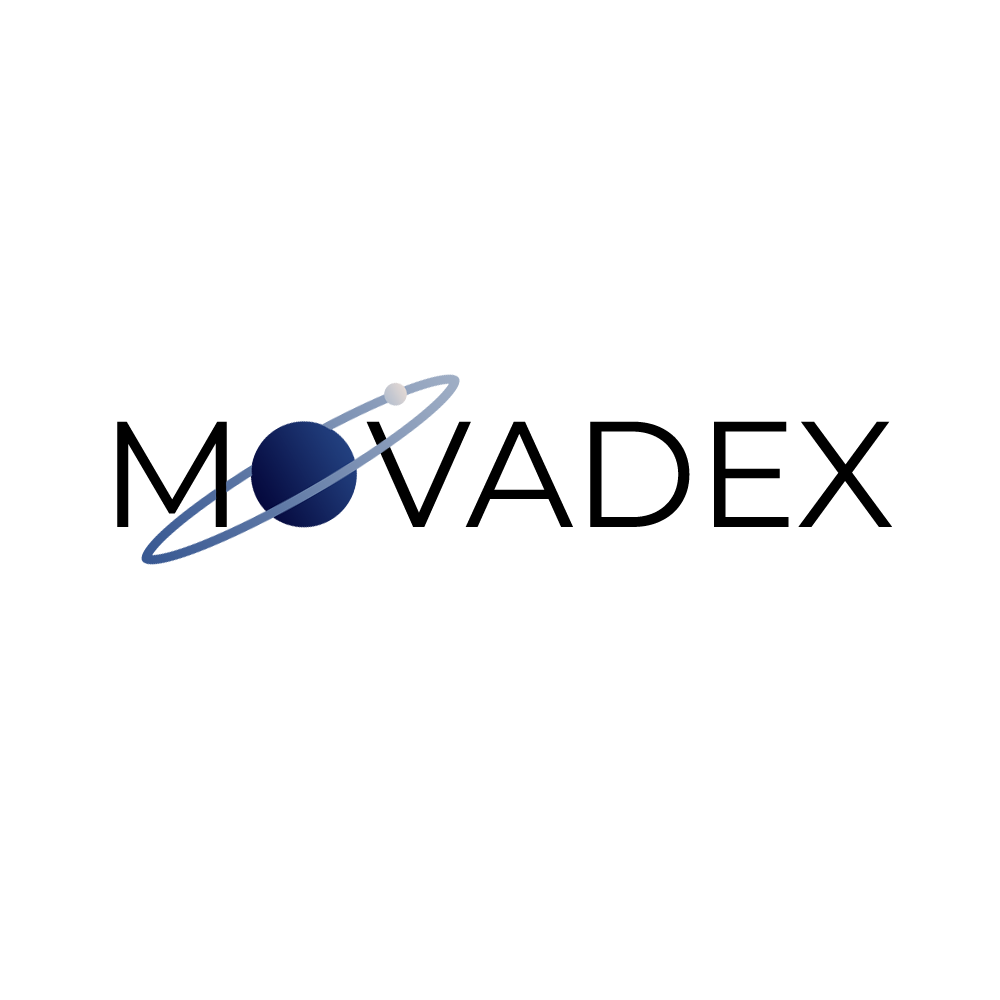
<style>
.page{position:relative;width:1000px;height:1000px;background:#ffffff}
.page>*{position:absolute;margin:0}
.t1{font:150px "Montserrat-Regular";color:#000000;text-transform:uppercase}
</style>
<div class="page">
<p class="t1" style="left:117px;top:420px;width:775px;height:108px">movadex</p>
</div>
